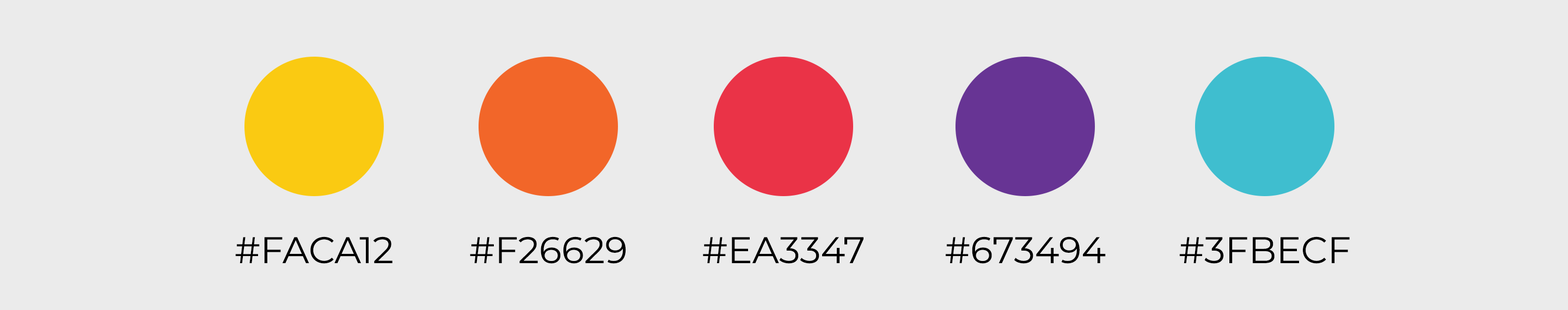
<style>
.page{position:relative;width:1568px;height:310px;background:#ebebeb}
.page>*{position:absolute;margin:0}
.t1{font:36.9px "Montserrat-Regular";color:#000000;text-transform:uppercase}
</style>
<div class="page">
<p class="t1" style="left:235px;top:236px;width:158px;height:28px">#faca12</p>
<p class="t1" style="left:470px;top:236px;width:156px;height:28px">#f26629</p>
<p class="t1" style="left:703px;top:237px;width:160px;height:27px">#ea3347</p>
<p class="t1" style="left:946px;top:236px;width:160px;height:28px">#673494</p>
<p class="t1" style="left:1179px;top:236px;width:171px;height:28px">#3fbecf</p>
</div>
